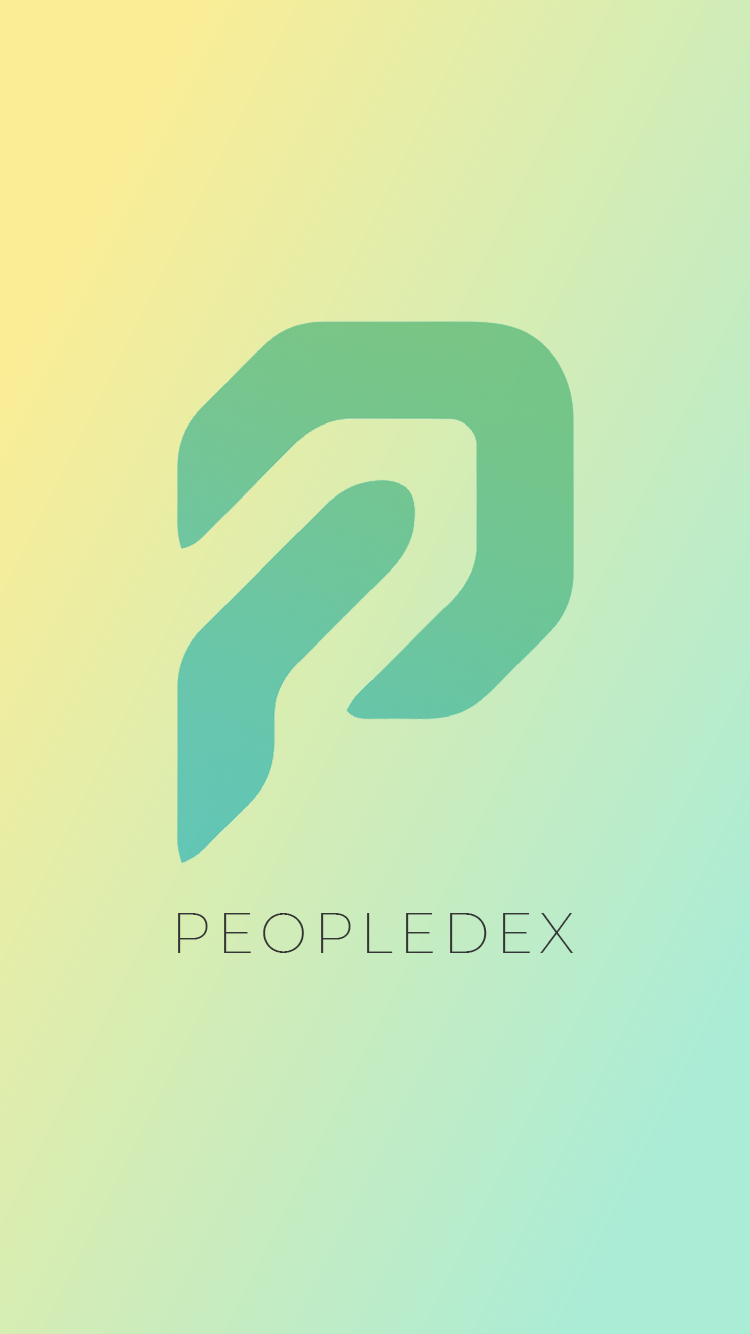
<style>
.page{position:relative;width:750px;height:1334px}
.page>*{position:absolute;margin:0}
.t1{font:56.2px "Montserrat-ExtraLight";letter-spacing:0.115em;color:#353535}
</style>
<div class="page">
<p class="t1" style="left:178px;top:913px;width:396px;height:40px">PEOPLEDEX</p>
</div>
